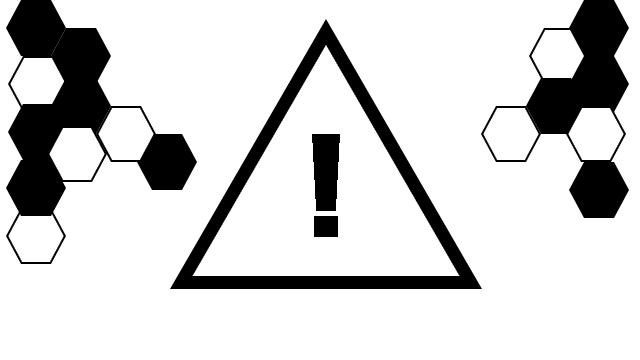
<style>
.page{position:relative;width:640px;height:360px;background:#ffffff}
.page>*{position:absolute;margin:0}
.t1{font:130px "Impact";color:#000000}
</style>
<div class="page">
<p class="t1" style="left:312px;top:134px;width:28px;height:103px">!</p>
</div>
